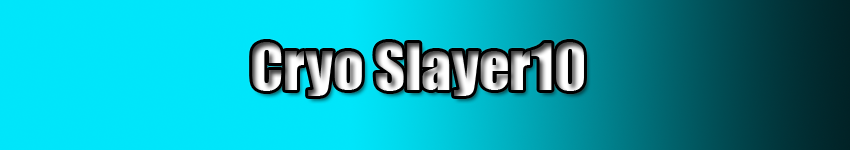
<style>
.page{position:relative;width:850px;height:150px;background:#00e5fa}
.page>*{position:absolute;margin:0}
.t1{font:60px "Impact"}
</style>
<div class="page">
<p class="t1" style="left:252px;top:42px;width:332px;height:54px">Cryo Slayer10</p>
</div>
